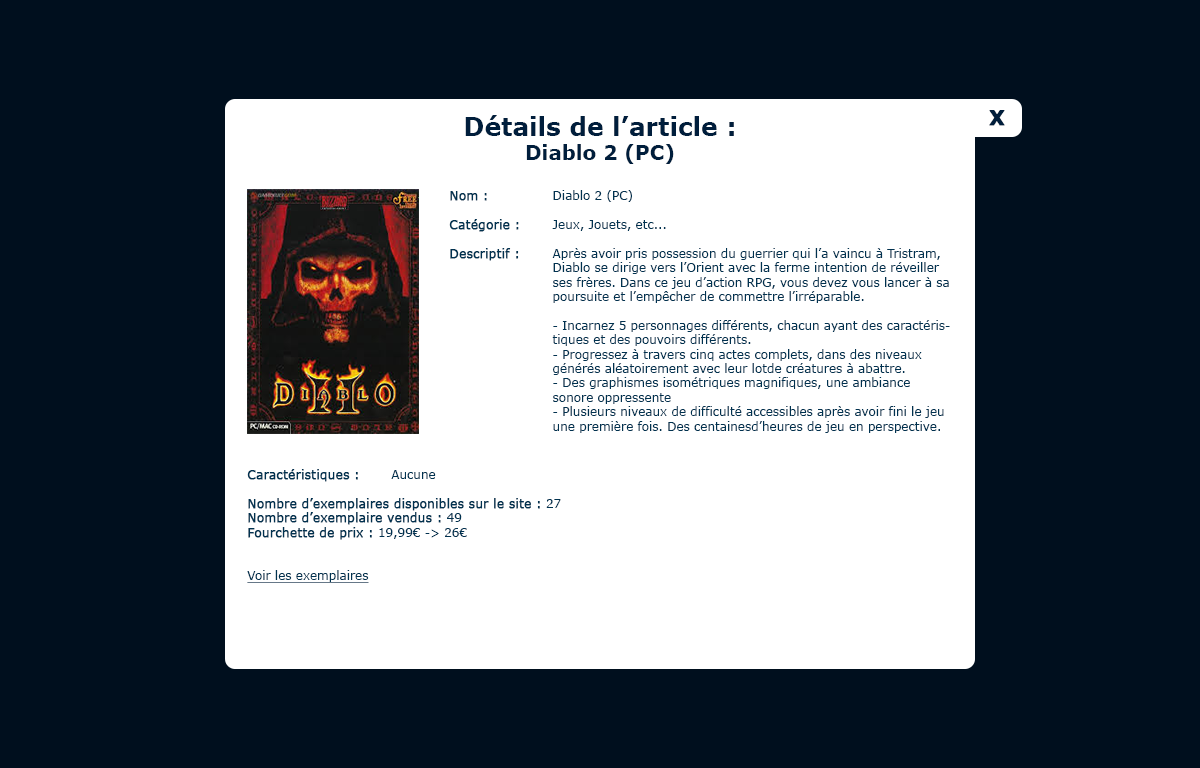
<style>
.page{position:relative;width:1200px;height:768px;background:#000f1e}
.page>*{position:absolute;margin:0}
.t1{font:20px "Verdana-Bold";color:#001e3c;font-weight:bold}
.t2{font:25px "Verdana-Bold";color:#001e3c}
.t3{font:20px "Verdana-Bold";color:#001e3c}
.t4{font:12px "Verdana";color:#003250;font-weight:bold}
.t5{font:12px "Verdana";color:#003250}
.t6{font:12px "Verdana";color:#003250;text-decoration:underline}
</style>
<div class="page">
<p class="t1" style="left:989px;top:110px;width:16px;height:16px">X</p>
<p class="t2" style="left:465px;top:115px;width:269px;height:49px;text-align:center">Détails de l’article :<br><span class="t3">Diablo 2 (PC)</span></p>
<p class="t4" style="left:449px;top:191px;width:70px;height:70px">Nom :<br><br>Catégorie :<br><br>Descriptif :</p>
<p class="t5" style="left:552px;top:190px;width:398px;height:243px">Diablo 2 (PC)<br><br>Jeux, Jouets, etc...<br><br>Après avoir pris possession du guerrier qui l’a vaincu à Tristram, Diablo se dirige vers l’Orient avec la ferme intention de réveiller ses frères. Dans ce jeu d’action RPG, vous devez vous lancer à sa poursuite et l’empêcher de commettre l’irréparable.<br><br>- Incarnez 5 personnages différents, chacun ayant des caractéristiques et des pouvoirs différents.<br>- Progressez à travers cinq actes complets, dans des niveaux générés aléatoirement avec leur lotde créatures à abattre.<br>- Des graphismes isométriques magnifiques, une ambiance sonore oppressente<br>- Plusieurs niveaux de difficulté accessibles après avoir fini le jeu une première fois. Des centainesd’heures de jeu en perspective.</p>
<p class="t4" style="left:247px;top:469px;width:314px;height:114px">Caractéristiques :<span class="t5">  Aucune<br><br></span>Nombre d’exemplaires disponibles sur le site :<span class="t5"> 27<br></span>Nombre d’exemplaire vendus :<span class="t5"> 49<br></span>Fourchette de prix :<span class="t5"> 19,99€ -&gt; 26€<br><br><br></span><span class="t6">Voir les exemplaires</span></p>
</div>
